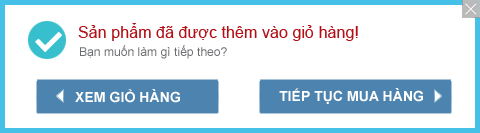
<style>
.page{position:relative;width:480px;height:133px;background:#ffffff}
.page>*{position:absolute;margin:0}
.t1{font:16px "ArialMT";letter-spacing:0.005em;color:#b20f16}
.t2{font:12px "ArialMT";letter-spacing:0.005em;color:#6d6e71}
.t3{font:14px "Arial-BoldMT";letter-spacing:0.005em;color:#ffffff}
</style>
<div class="page">
<p class="t1" style="left:78px;top:23px;width:280px;height:18px">Sản phẩm đã được thêm vào giỏ hàng!</p>
<p class="t2" style="left:80px;top:45px;width:147px;height:14px">Bạn muốn làm gì tiếp theo?</p>
<p class="t3" style="left:75px;top:89px;width:105px;height:14px">XEM GIỎ HÀNG</p>
<p class="t3" style="left:279px;top:88px;width:144px;height:16px">TIẾP TỤC MUA HÀNG</p>
</div>
